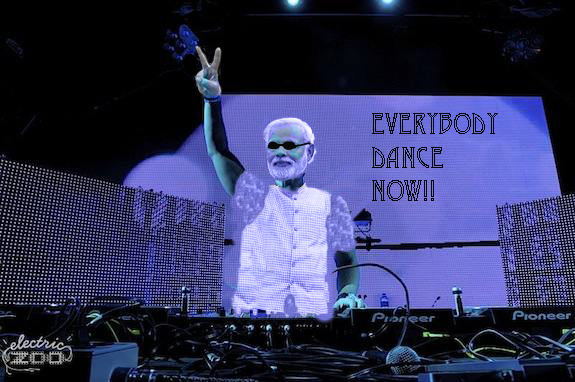
<style>
.page{position:relative;width:575px;height:382px}
.page>*{position:absolute;margin:0}
.t1{font:28px "Desdemona";color:#0a0a0a}
</style>
<div class="page">
<p class="t1" style="left:372px;top:113px;width:126px;height:88px">EVERYBODY<br>DANCE<br>NOW!!</p>
</div>
